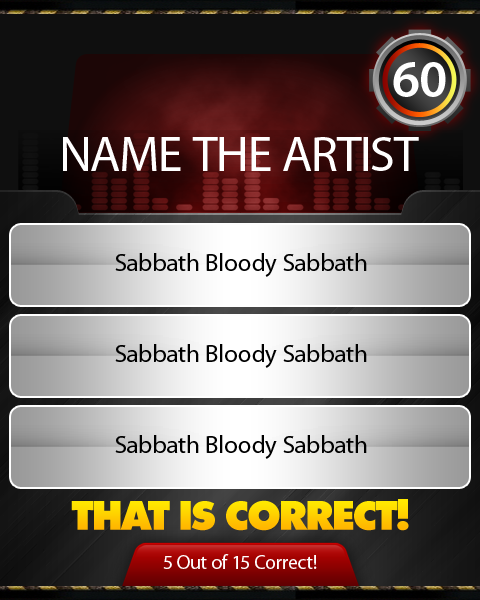
<style>
.page{position:relative;width:480px;height:600px}
.page>*{position:absolute;margin:0}
.t1{font:52.4px "MyriadPro-Semibold";letter-spacing:-0.01em;color:#ffffff}
.t2{font:50px "MyriadPro-Regular";letter-spacing:-0.01em;color:#ffffff}
.t3{font:25px "MyriadPro-Regular";color:#000000}
.t4{font:40.7px "IntrepidExtraBold";letter-spacing:-0.02em;color:#ffd100}
.t5{font:20px "MyriadPro-Regular";letter-spacing:-0.01em;color:#ffffff}
</style>
<div class="page">
<p class="t1" style="left:393px;top:62px;width:53px;height:35px">60</p>
<p class="t2" style="left:63px;top:137px;width:356px;height:34px">NAME THE ARTIST</p>
<p class="t3" style="left:115px;top:253px;width:252px;height:24px">Sabbath Bloody Sabbath</p>
<p class="t3" style="left:115px;top:344px;width:252px;height:24px">Sabbath Bloody Sabbath</p>
<p class="t3" style="left:115px;top:435px;width:252px;height:24px">Sabbath Bloody Sabbath</p>
<p class="t4" style="left:71px;top:499px;width:338px;height:32px">THAT IS CORRECT!</p>
<p class="t5" style="left:163px;top:554px;width:154px;height:15px">5 Out of 15 Correct!</p>
</div>
